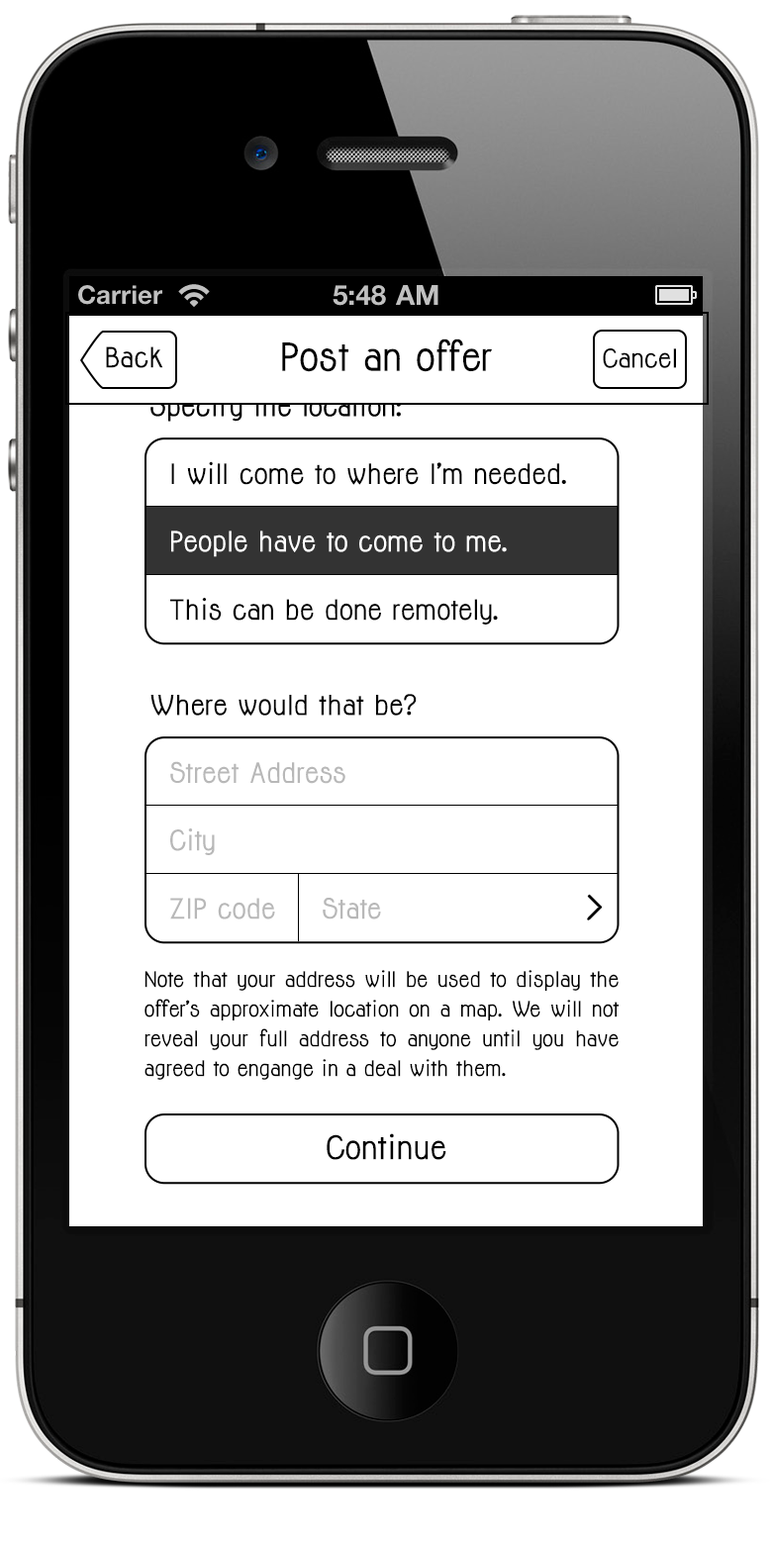
<style>
.page{position:relative;width:772px;height:1545px;background:#ffffff}
.page>*{position:absolute;margin:0}
.t1{font:35.6px "Jolly-Bold";color:#000000}
.t2{font:25.7px "Jolly-Bold";color:#000000}
.t3{font:23.8px "Jolly-Bold";color:#000000}
.t4{font:25.7px "Jolly-Bold";color:#ffffff}
.t5{font:25.5px "Jolly-Bold";color:#000000}
.t6{font:25.7px "Jolly-Bold";color:#b8b8b8}
.t7{font:19.8px/29.7px "Jolly-Bold";letter-spacing:-0.01em;color:#000000}
.t8{font:29.8px "Jolly-Bold";color:#000000}
</style>
<div class="page">
<p class="t1" style="left:282px;top:338px;width:210px;height:34px">Post an offer</p>
<p class="t2" style="left:106px;top:346px;width:57px;height:22px">Back</p>
<p class="t3" style="left:603px;top:348px;width:73px;height:20px">Cancel</p>
<p class="t2" style="left:171px;top:461px;width:395px;height:24px">I will come to where I’m needed.</p>
<p class="t4" style="left:171px;top:530px;width:336px;height:27px">People have to come to me.</p>
<p class="t2" style="left:170px;top:598px;width:328px;height:26px">This can be done remotely.</p>
<p class="t5" style="left:150px;top:694px;width:267px;height:22px">Where would that be?</p>
<p class="t6" style="left:170px;top:761px;width:175px;height:23px">Street Address</p>
<p class="t6" style="left:170px;top:828px;width:45px;height:27px">City</p>
<p class="t6" style="left:170px;top:898px;width:105px;height:21px">ZIP code</p>
<p class="t6" style="left:323px;top:898px;width:58px;height:21px">State</p>
<p class="t7" style="left:144px;top:970px;width:475px;height:110px;text-align:justify">Note that your address will be used to display the   offer’s approximate location on a map. We will not reveal your full address to anyone until you have agreed to engange in a deal with them.</p>
<p class="t8" style="left:327px;top:1133px;width:119px;height:27px">Continue</p>
</div>
